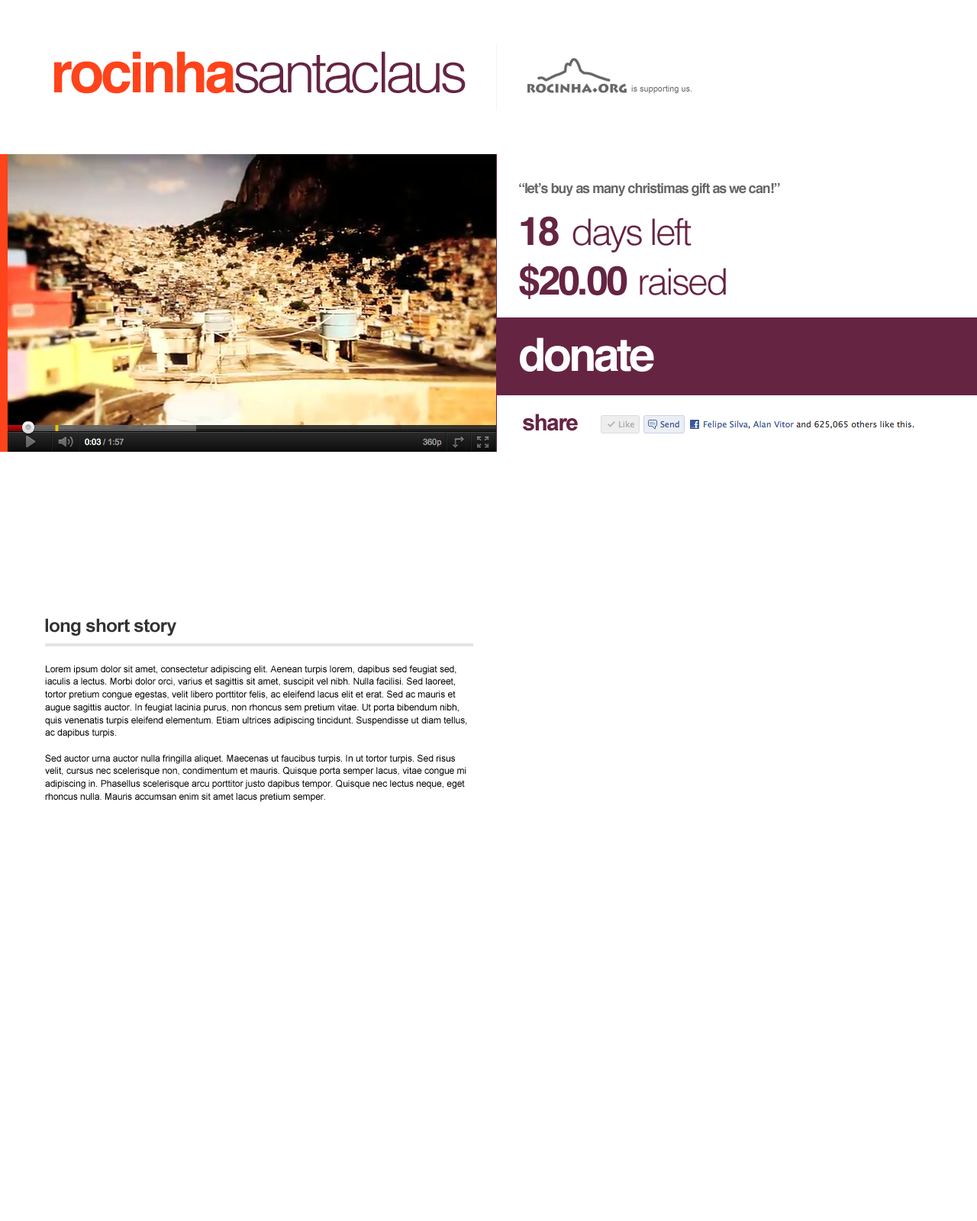
<style>
.page{position:relative;width:977px;height:1221px;background:#ffffff}
.page>*{position:absolute;margin:0}
.t1{font:56.5px "Helvetica-Light";letter-spacing:-0.075em;color:#662443}
.t2{font:56.5px "Helvetica-Bold";letter-spacing:-0.055em;color:#ff431a}
.t3{font:8.4px "ArialMT";color:#666666}
.t4{font:13.7px "Helvetica-Bold";letter-spacing:-0.06em;color:#666666}
.t5{font:36.6px "Helvetica-Light";letter-spacing:-0.06em;color:#662443}
.t6{font:39.7px "Helvetica-Bold";letter-spacing:-0.06em;color:#662443}
.t7{font:45.8px "Helvetica-Bold";letter-spacing:-0.06em;color:#ffffff}
.t8{font:22.9px "Arial-BoldMT";letter-spacing:-0.06em;color:#662443}
.t9{font:18.3px "Arial-BoldMT";letter-spacing:-0.025em;color:#333333}
.t10{font:9.2px/12.8px "ArialMT";color:#000000}
</style>
<div class="page">
<p class="t1" style="left:54px;top:51px;width:411px;height:43px"><span class="t2">rocinha</span>santaclaus</p>
<p class="t3" style="left:631px;top:85px;width:60px;height:9px">is supporting us.</p>
<p class="t4" style="left:519px;top:183px;width:261px;height:13px">“let’s buy as many christimas gift as we can!”</p>
<p class="t5" style="left:520px;top:216px;width:171px;height:37px"><span class="t6">18 </span>days left</p>
<p class="t6" style="left:519px;top:263px;width:207px;height:36px">$20.00 <span class="t5">raised</span></p>
<p class="t7" style="left:520px;top:337px;width:134px;height:35px">donate</p>
<p class="t8" style="left:523px;top:414px;width:55px;height:17px">share</p>
<p class="t9" style="left:45px;top:618px;width:131px;height:18px">long short story</p>
<p class="t10" style="left:45px;top:665px;width:422px;height:137px">Lorem ipsum dolor sit amet, consectetur adipiscing elit. Aenean turpis lorem, dapibus sed feugiat sed, iaculis a lectus. Morbi dolor orci, varius et sagittis sit amet, suscipit vel nibh. Nulla facilisi. Sed laoreet, tortor pretium congue egestas, velit libero porttitor felis, ac eleifend lacus elit et erat. Sed ac mauris et augue sagittis auctor. In feugiat lacinia purus, non rhoncus sem pretium vitae. Ut porta bibendum nibh, quis venenatis turpis eleifend elementum. Etiam ultrices adipiscing tincidunt. Suspendisse ut diam tellus, ac dapibus turpis.<br><br>Sed auctor urna auctor nulla fringilla aliquet. Maecenas ut faucibus turpis. In ut tortor turpis. Sed risus velit, cursus nec scelerisque non, condimentum et mauris. Quisque porta semper lacus, vitae congue mi adipiscing in. Phasellus scelerisque arcu porttitor justo dapibus tempor. Quisque nec lectus neque, eget rhoncus nulla. Mauris accumsan enim sit amet lacus pretium semper.</p>
</div>
